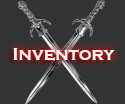
<style>
.page{position:relative;width:125px;height:104px;background:#333333}
.page>*{position:absolute;margin:0}
.t1{font:17.9px "CopperplateGothic-Bold";color:#ffffff}
</style>
<div class="page">
<p class="t1" style="left:13px;top:48px;width:102px;height:13px">Inventory</p>
</div>
